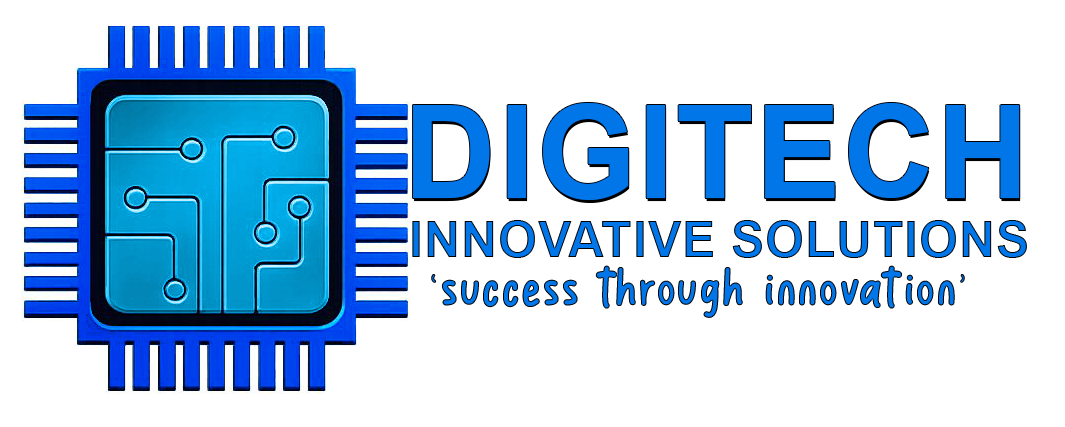
<style>
.page{position:relative;width:1065px;height:427px;background:#ffffff}
.page>*{position:absolute;margin:0}
.t1{font:129px "Arial-BoldMT";letter-spacing:0.02em;color:#0076e9}
.t2{font:49.8px "Arial-BoldMT";letter-spacing:0.02em}
.t3{font:62.7px "SweetCandy";letter-spacing:0.04em}
</style>
<div class="page">
<p class="t1" style="left:413px;top:103px;width:607px;height:97px">DIGITECH</p>
<p class="t2" style="left:412px;top:220px;width:615px;height:38px">INNOVATIVE SOLUTIONS</p>
<p class="t3" style="left:431px;top:265px;width:534px;height:53px">‘success through innovation’</p>
</div>
